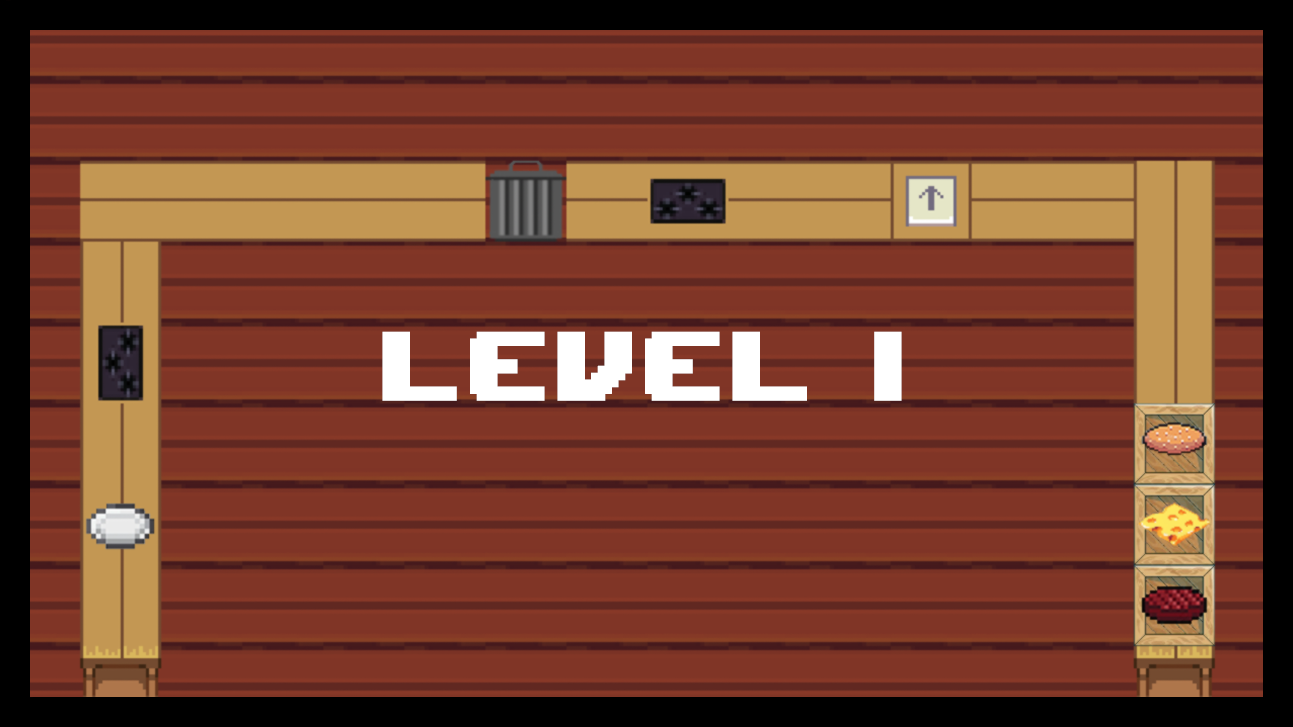
<style>
.page{position:relative;width:1293px;height:727px;background:#803526}
.page>*{position:absolute;margin:0}
.t1{font:136.7px "UpheavalTT-BRK-";letter-spacing:0.025em;color:#ffffff;font-weight:bold}
</style>
<div class="page">
<p class="t1" style="left:382px;top:331px;width:520px;height:70px">LEVEL 1</p>
</div>
